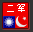
<style>
.page{position:relative;width:33px;height:32px;background:#f20000}
.page>*{position:absolute;margin:0}
.t1{font:10.4px "SimSun";color:#ffffff}
</style>
<div class="page">
<p class="t1" style="left:7px;top:4px;width:18px;height:8px">二军</p>
</div>
